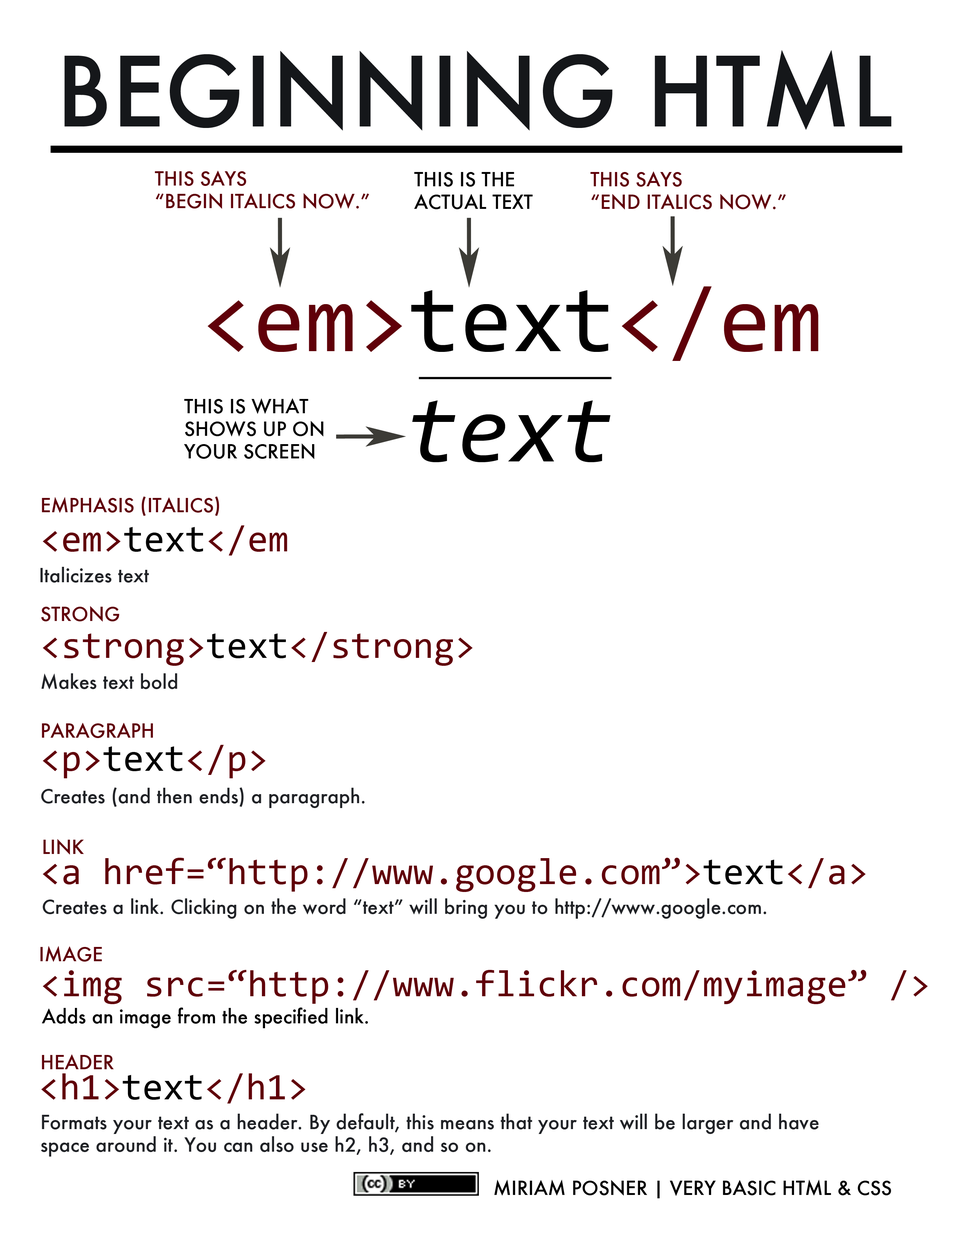
<style>
.page{position:relative;width:960px;height:1242px;background:#ffffff}
.page>*{position:absolute;margin:0}
.t1{font:94.1px "Futura-Medium";color:#15171a}
.t2{font:18.8px "Futura-Medium";color:#600009}
.t3{font:18.8px "Futura-Medium";color:#000000}
.t4{font:94.1px "Consolas";color:#600009}
.t5{font:94.1px "Consolas";color:#000000}
.t6{font:94.1px "Consolas-Italic";color:#000000}
.t7{font:37.6px "Consolas";color:#600009}
.t8{font:37.6px "Consolas";color:#000000}
.t9{font:18.8px "Futura-Medium";color:#202226}
</style>
<div class="page">
<p class="t1" style="left:64px;top:50px;width:827px;height:81px">BEGINNING HTML</p>
<p class="t2" style="left:155px;top:171px;width:214px;height:38px">THIS SAYS <br>“BEGIN ITALICS NOW.”</p>
<p class="t3" style="left:414px;top:172px;width:119px;height:37px">THIS IS THE ACTUAL TEXT</p>
<p class="t2" style="left:590px;top:171px;width:196px;height:39px">THIS SAYS <br>“END ITALICS NOW.”</p>
<p class="t4" style="left:207px;top:286px;width:611px;height:75px">&lt;em&gt;<span class="t5">text</span>&lt;/em&gt;</p>
<p class="t3" style="left:184px;top:398px;width:139px;height:61px">THIS IS WHAT SHOWS UP ON YOUR SCREEN</p>
<p class="t6" style="left:412px;top:401px;width:199px;height:61px">text</p>
<p class="t2" style="left:42px;top:497px;width:177px;height:19px">EMPHASIS (ITALICS)</p>
<p class="t7" style="left:43px;top:526px;width:244px;height:30px">&lt;em&gt;<span class="t8">text</span>&lt;/em&gt;</p>
<p class="t9" style="left:40px;top:567px;width:109px;height:16px">Italicizes text</p>
<p class="t2" style="left:41px;top:606px;width:78px;height:16px">STRONG</p>
<p class="t7" style="left:43px;top:632px;width:430px;height:34px">&lt;strong&gt;<span class="t8">text</span>&lt;/strong&gt;</p>
<p class="t9" style="left:41px;top:673px;width:136px;height:17px">Makes text bold</p>
<p class="t2" style="left:42px;top:723px;width:111px;height:15px">PARAGRAPH</p>
<p class="t8" style="left:43px;top:745px;width:223px;height:33px"><span class="t7">&lt;p&gt;</span>text<span class="t7">&lt;/p&gt;</span></p>
<p class="t9" style="left:41px;top:788px;width:324px;height:20px">Creates (and then ends) a paragraph.</p>
<p class="t2" style="left:43px;top:839px;width:41px;height:16px">LINK</p>
<p class="t7" style="left:43px;top:858px;width:823px;height:34px">&lt;a href=“http://www.google.com”&gt;<span class="t8">text</span>&lt;/a&gt;</p>
<p class="t9" style="left:43px;top:898px;width:723px;height:21px">Creates a link. Clicking on the word “text” will bring you to http://www.google.com.</p>
<p class="t2" style="left:40px;top:946px;width:62px;height:16px">IMAGE</p>
<p class="t7" style="left:43px;top:970px;width:885px;height:34px">&lt;img src=“http://www.flickr.com/myimage” /&gt;</p>
<p class="t3" style="left:42px;top:1008px;width:326px;height:20px">Adds an image from the specified link.</p>
<p class="t2" style="left:42px;top:1054px;width:72px;height:15px">HEADER</p>
<p class="t7" style="left:41px;top:1074px;width:265px;height:30px">&lt;h1&gt;<span class="t8">text</span>&lt;/h1&gt;</p>
<p class="t9" style="left:41px;top:1113px;width:778px;height:44px">Formats your text as a header. By default, this means that your text will be larger and have space around it. You can also use h2, h3, and so on.</p>
<p class="t3" style="left:494px;top:1180px;width:397px;height:19px">MIRIAM POSNER | VERY BASIC HTML &amp; CSS</p>
</div>
